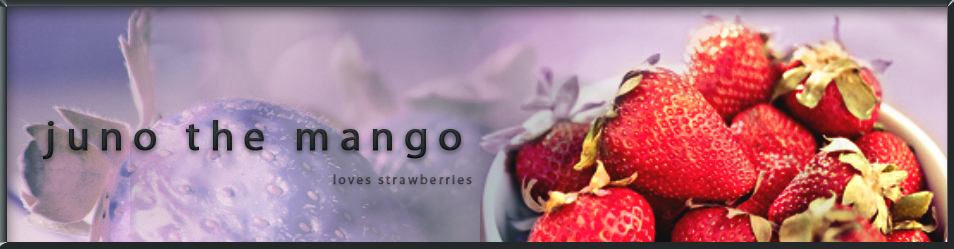
<style>
.page{position:relative;width:954px;height:249px}
.page>*{position:absolute;margin:0}
.t1{font:42px "MyriadPro-Regular";letter-spacing:0.22em;color:#202627;font-weight:bold}
.t2{font:13px "MyriadPro-Regular";letter-spacing:0.16em;color:#46414b;font-weight:bold}
</style>
<div class="page">
<p class="t1" style="left:42px;top:120px;width:419px;height:40px">juno the mango</p>
<p class="t1" style="left:42px;top:120px;width:419px;height:40px">juno the mango</p>
<p class="t2" style="left:333px;top:174px;width:139px;height:11px">loves strawberries</p>
<p class="t2" style="left:333px;top:174px;width:139px;height:11px">loves strawberries</p>
</div>
